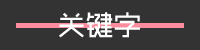
<style>
.page{position:relative;width:200px;height:50px;background:#333333}
.page>*{position:absolute;margin:0}
.t1{font:28px "MFShangHei_Noncommercial-Regular";color:#ffffff}
</style>
<div class="page">
<p class="t1" style="left:59px;top:12px;width:81px;height:26px">关键字</p>
</div>
